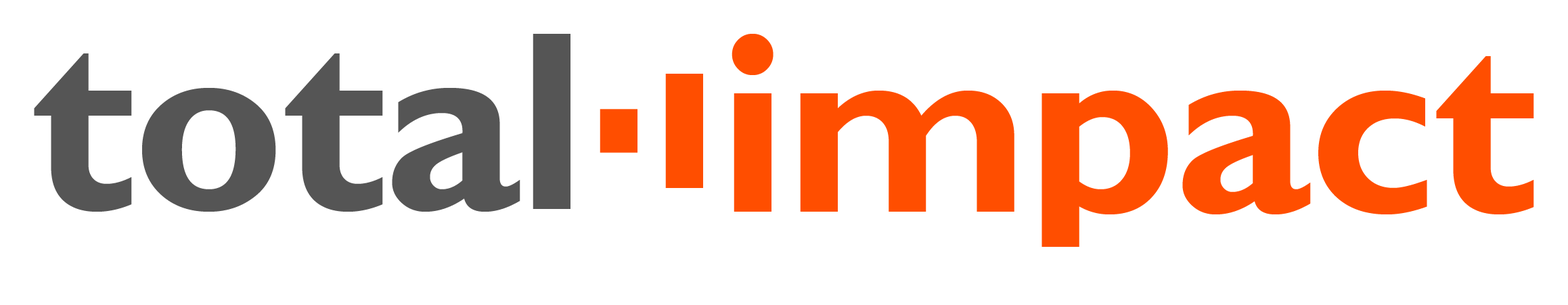
<style>
.page{position:relative;width:1568px;height:305px;background:#ffffff}
.page>*{position:absolute;margin:0}
.t1{font:256.3px "GillSansMT-Bold";letter-spacing:-0.01em;color:#555555}
.t2{font:256.3px "GillSansMT-Bold";letter-spacing:-0.01em;color:#ff4e00}
</style>
<div class="page">
<p class="t1" style="left:34px;top:34px;width:536px;height:178px">total</p>
<p class="t2" style="left:732px;top:34px;width:802px;height:237px">impact</p>
</div>
